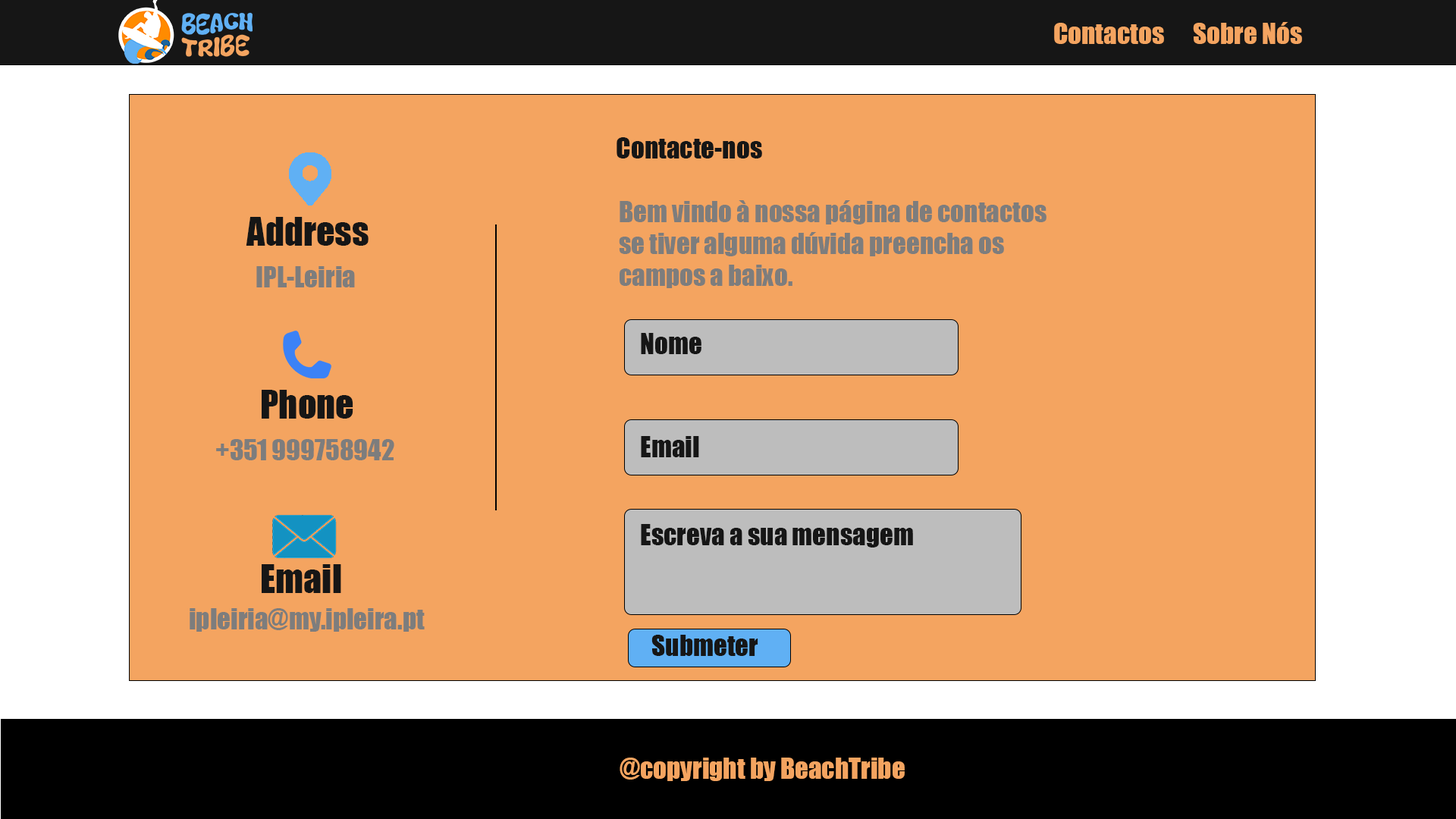
<style>
.page{position:relative;width:1456px;height:819px;background:#f4a460}
.page>*{position:absolute;margin:0}
.t1{font:26.5px "Impact";color:#f4a460}
.t2{font:26.5px "Impact";color:#161616}
.t3{font:26.5px "Impact";color:#7d7d7d}
.t4{font:36.4px "Impact";color:#161616}
</style>
<div class="page">
<p class="t1" style="left:1054px;top:23px;width:110px;height:21px">Contactos</p>
<p class="t1" style="left:1193px;top:22px;width:109px;height:22px">Sobre Nós</p>
<p class="t2" style="left:617px;top:137px;width:145px;height:21px">Contacte-nos</p>
<p class="t3" style="left:619px;top:200px;width:427px;height:88px">Bem vindo à nossa página de contactos<br>    se tiver alguma dúvida preencha os<br>    campos a baixo.</p>
<p class="t4" style="left:246px;top:217px;width:123px;height:29px">Address</p>
<p class="t3" style="left:256px;top:266px;width:99px;height:21px">IPL-Leiria</p>
<p class="t2" style="left:641px;top:333px;width:60px;height:21px">Nome</p>
<p class="t4" style="left:262px;top:390px;width:91px;height:29px">Phone</p>
<p class="t2" style="left:641px;top:436px;width:58px;height:21px">Email</p>
<p class="t3" style="left:216px;top:439px;width:178px;height:21px">+351 999758942</p>
<p class="t2" style="left:641px;top:524px;width:272px;height:24px">Escreva a sua mensagem</p>
<p class="t4" style="left:262px;top:564px;width:79px;height:29px">Email</p>
<p class="t3" style="left:190px;top:608px;width:235px;height:24px">ipleiria@my.ipleira.pt</p>
<p class="t2" style="left:651px;top:635px;width:107px;height:21px">Submeter</p>
<p class="t1" style="left:620px;top:758px;width:285px;height:23px">@copyright by BeachTribe</p>
</div>
